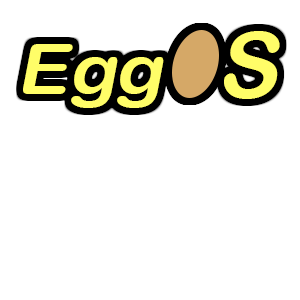
<style>
.page{position:relative;width:300px;height:300px;background:#ffffff}
.page>*{position:absolute;margin:0}
.t1{font:92px "ArialRoundedMTBold";color:#fffd68;font-style:italic}
.t2{font:70px "ArialRoundedMTBold";color:#fffd68;font-style:italic;scale:1.1 1}
</style>
<div class="page">
<p class="t1" style="left:224px;top:31px;width:56px;height:68px">S</p>
<p class="t2" style="left:23px;top:44px;width:141px;height:64px">Egg</p>
</div>
